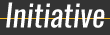
<style>
.page{position:relative;width:110px;height:35px;background:#333333}
.page>*{position:absolute;margin:0}
.t1{font:31px "Oswald-RegularItalic";color:#ffffff}
</style>
<div class="page">
<p class="t1" style="left:6px;top:2px;width:99px;height:26px">Initiative</p>
</div>
